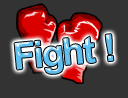
<style>
.page{position:relative;width:128px;height:98px;background:#333333}
.page>*{position:absolute;margin:0}
.t1{font:37.2px "Arial-BoldMT";color:#5fbfef}
</style>
<div class="page">
<p class="t1" style="left:14px;top:34px;width:100px;height:40px;rotate:-5deg">Fight !</p>
</div>
